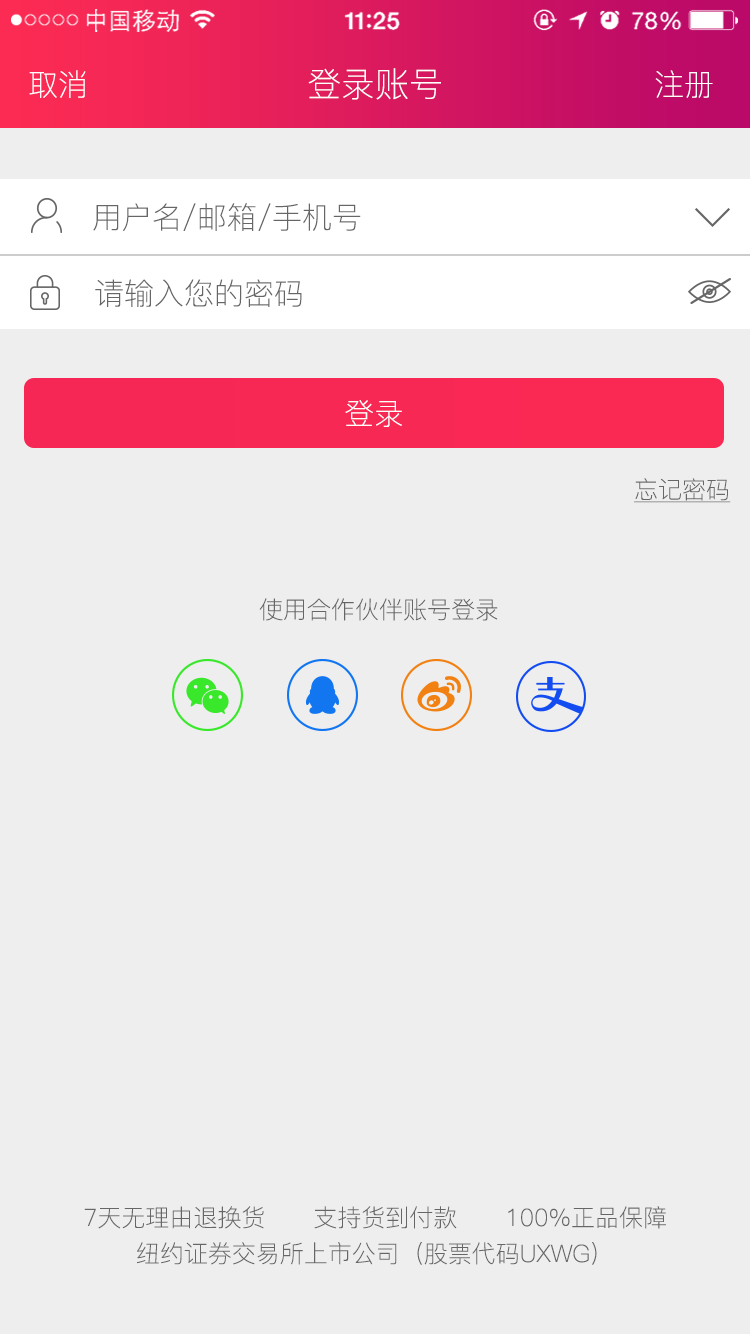
<style>
.page{position:relative;width:750px;height:1334px;background:#eeeeee}
.page>*{position:absolute;margin:0}
.t1{font:30px "PingFang-SC-Light";color:#ffffff}
.t2{font:34px "PingFang-SC-Light";color:#ffffff}
.t3{font:30px "PingFang-SC-Light";color:#666666}
.t4{font:24px "PingFang-SC-Light";color:#666666;text-decoration:underline}
.t5{font:24px "PingFang-SC-Light";color:#666666}
.t6{font:24px/36px "PingFang-SC-Light";color:#666666}
</style>
<div class="page">
<p class="t1" style="left:29px;top:70px;width:57px;height:28px">取消</p>
<p class="t2" style="left:308px;top:68px;width:133px;height:32px">登录账号</p>
<p class="t1" style="left:655px;top:70px;width:58px;height:28px">注册</p>
<p class="t3" style="left:93px;top:203px;width:268px;height:28px">用户名/邮箱/手机号</p>
<p class="t3" style="left:95px;top:279px;width:207px;height:28px">请输入您的密码</p>
<p class="t1" style="left:345px;top:400px;width:57px;height:27px">登录</p>
<p class="t4" style="left:634px;top:478px;width:97px;height:25px">忘记密码</p>
<p class="t5" style="left:259px;top:598px;width:239px;height:23px">使用合作伙伴账号登录</p>
<p class="t6" style="left:84px;top:1206px;width:582px;height:59px;text-align:center">7天无理由退换货      支持货到付款      100%正品保障<br>纽约证券交易所上市公司（股票代码UXWG）</p>
</div>
